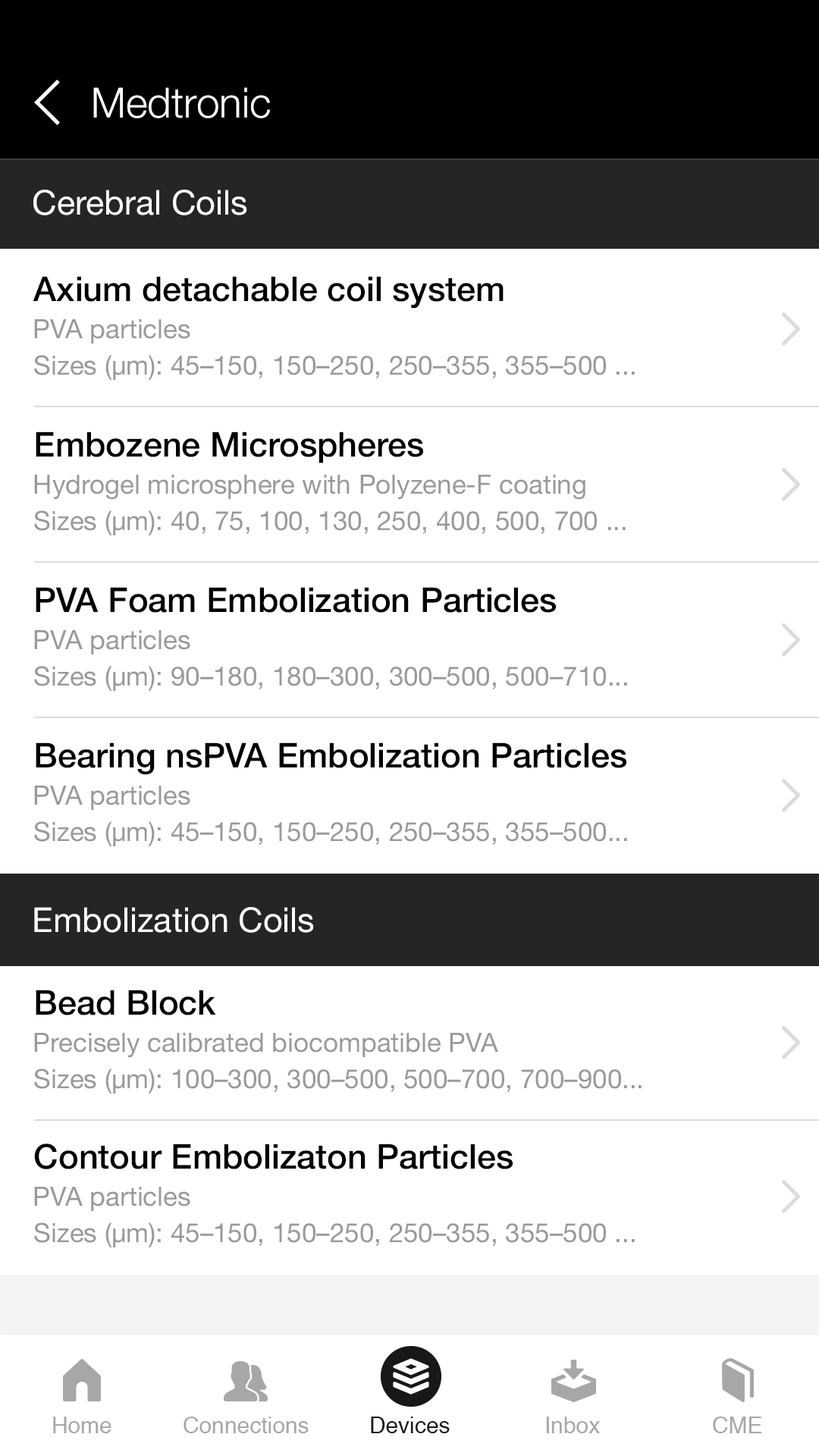
<style>
.page{position:relative;width:819px;height:1456px;background:#ffffff}
.page>*{position:absolute;margin:0}
.t1{font:41.7px "HelveticaNeue-Light";color:#ffffff}
.t2{font:34.1px "HelveticaNeue";color:#ffffff}
.t3{font:34.1px "HelveticaNeue-Medium";color:#000000}
.t4{font:26.5px "HelveticaNeue";color:#999999}
.t5{font:22.7px "Helvetica";color:#a7a7a7}
.t6{font:22.7px "Helvetica";color:#181818}
</style>
<div class="page">
<p class="t1" style="left:93px;top:87px;width:177px;height:31px">Medtronic</p>
<p class="t2" style="left:33px;top:190px;width:214px;height:25px">Cerebral Coils</p>
<p class="t3" style="left:33px;top:276px;width:471px;height:33px">Axium detachable coil system</p>
<p class="t4" style="left:34px;top:319px;width:156px;height:25px">PVA particles</p>
<p class="t4" style="left:34px;top:355px;width:601px;height:25px">Sizes (µm): 45–150, 150–250, 250–355, 355–500 ...</p>
<p class="t3" style="left:36px;top:431px;width:388px;height:32px">Embozene Microspheres</p>
<p class="t4" style="left:34px;top:475px;width:551px;height:25px">Hydrogel microsphere with Polyzene-F coating</p>
<p class="t4" style="left:34px;top:510px;width:592px;height:25px">Sizes (µm): 40, 75, 100, 130, 250, 400, 500, 700 ...</p>
<p class="t3" style="left:36px;top:587px;width:521px;height:26px">PVA Foam Embolization Particles</p>
<p class="t4" style="left:34px;top:630px;width:156px;height:24px">PVA particles</p>
<p class="t4" style="left:34px;top:666px;width:593px;height:25px">Sizes (µm): 90–180, 180–300, 300–500, 500–710...</p>
<p class="t3" style="left:36px;top:742px;width:591px;height:33px">Bearing nsPVA Embolization Particles</p>
<p class="t4" style="left:34px;top:786px;width:156px;height:24px">PVA particles</p>
<p class="t4" style="left:34px;top:821px;width:593px;height:25px">Sizes (µm): 45–150, 150–250, 250–355, 355–500...</p>
<p class="t2" style="left:34px;top:907px;width:280px;height:26px">Embolization Coils</p>
<p class="t3" style="left:36px;top:990px;width:180px;height:25px">Bead Block</p>
<p class="t4" style="left:34px;top:1033px;width:464px;height:25px">Precisely calibrated biocompatible PVA</p>
<p class="t4" style="left:34px;top:1068px;width:608px;height:26px">Sizes (µm): 100–300, 300–500, 500–700, 700–900...</p>
<p class="t3" style="left:34px;top:1144px;width:479px;height:25px">Contour Embolizaton Particles</p>
<p class="t4" style="left:34px;top:1187px;width:156px;height:24px">PVA particles</p>
<p class="t4" style="left:34px;top:1222px;width:601px;height:25px">Sizes (µm): 45–150, 150–250, 250–355, 355–500 ...</p>
<p class="t5" style="left:53px;top:1417px;width:58px;height:16px">Home</p>
<p class="t5" style="left:184px;top:1417px;width:125px;height:16px">Connections</p>
<p class="t6" style="left:371px;top:1417px;width:79px;height:16px">Devices</p>
<p class="t5" style="left:546px;top:1417px;width:54px;height:16px">Inbox</p>
<p class="t5" style="left:713px;top:1417px;width:48px;height:16px">CME</p>
</div>
